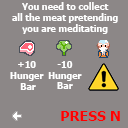
<style>
.page{position:relative;width:128px;height:128px;background:#8c8787}
.page>*{position:absolute;margin:0}
.t1{font:9px "Tahoma-Bold";color:#ffffff}
.t2{font:14px "Tahoma-Bold";color:#ff0000}
</style>
<div class="page">
<p class="t1" style="left:12px;top:2px;width:106px;height:32px;text-align:center">You need to collect<br>all the meat pretending<br>you are meditating</p>
<p class="t1" style="left:10px;top:61px;width:34px;height:29px;text-align:center">+10 <br>Hunger <br>Bar</p>
<p class="t1" style="left:48px;top:61px;width:34px;height:28px;text-align:center">-10<br>Hunger<br>Bar</p>
<p class="t2" style="left:61px;top:111px;width:59px;height:10px">PRESS N</p>
</div>
